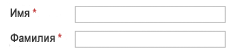
<style>
.page{position:relative;width:234px;height:53px;background:#ffffff}
.page>*{position:absolute;margin:0}
.t1{font:12px "ArialNarrow-Bold";color:#333333}
.t2{font:12px "ArialNarrow-Bold";color:#c33d3d}
</style>
<div class="page">
<p class="t1" style="left:10px;top:8px;width:27px;height:9px">Имя <span class="t2">*</span></p>
<p class="t1" style="left:10px;top:33px;width:52px;height:9px">Фамилия <span class="t2">*</span></p>
</div>
